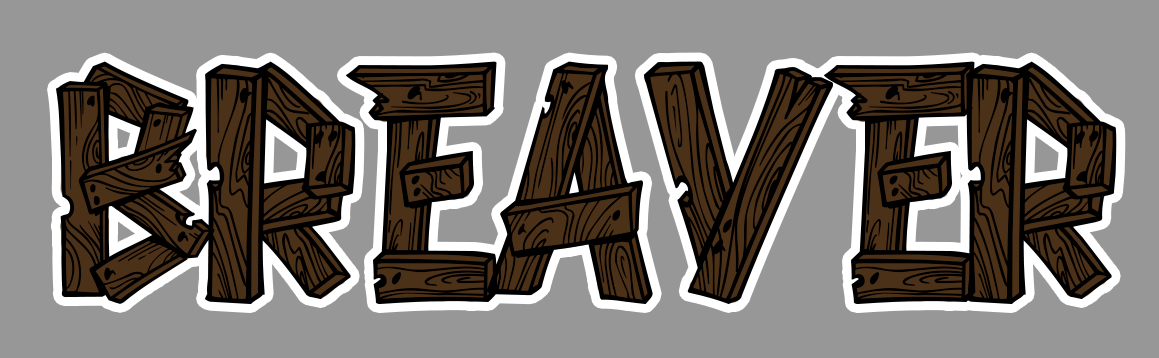
<style>
.page{position:relative;width:1159px;height:358px;background:#979797}
.page>*{position:absolute;margin:0}
.t1{font:291px "AlphaWood";letter-spacing:-0.06em;color:#000000}
</style>
<div class="page">
<p class="t1" style="left:56px;top:61px;width:1061px;height:243px">BREAVER</p>
</div>
